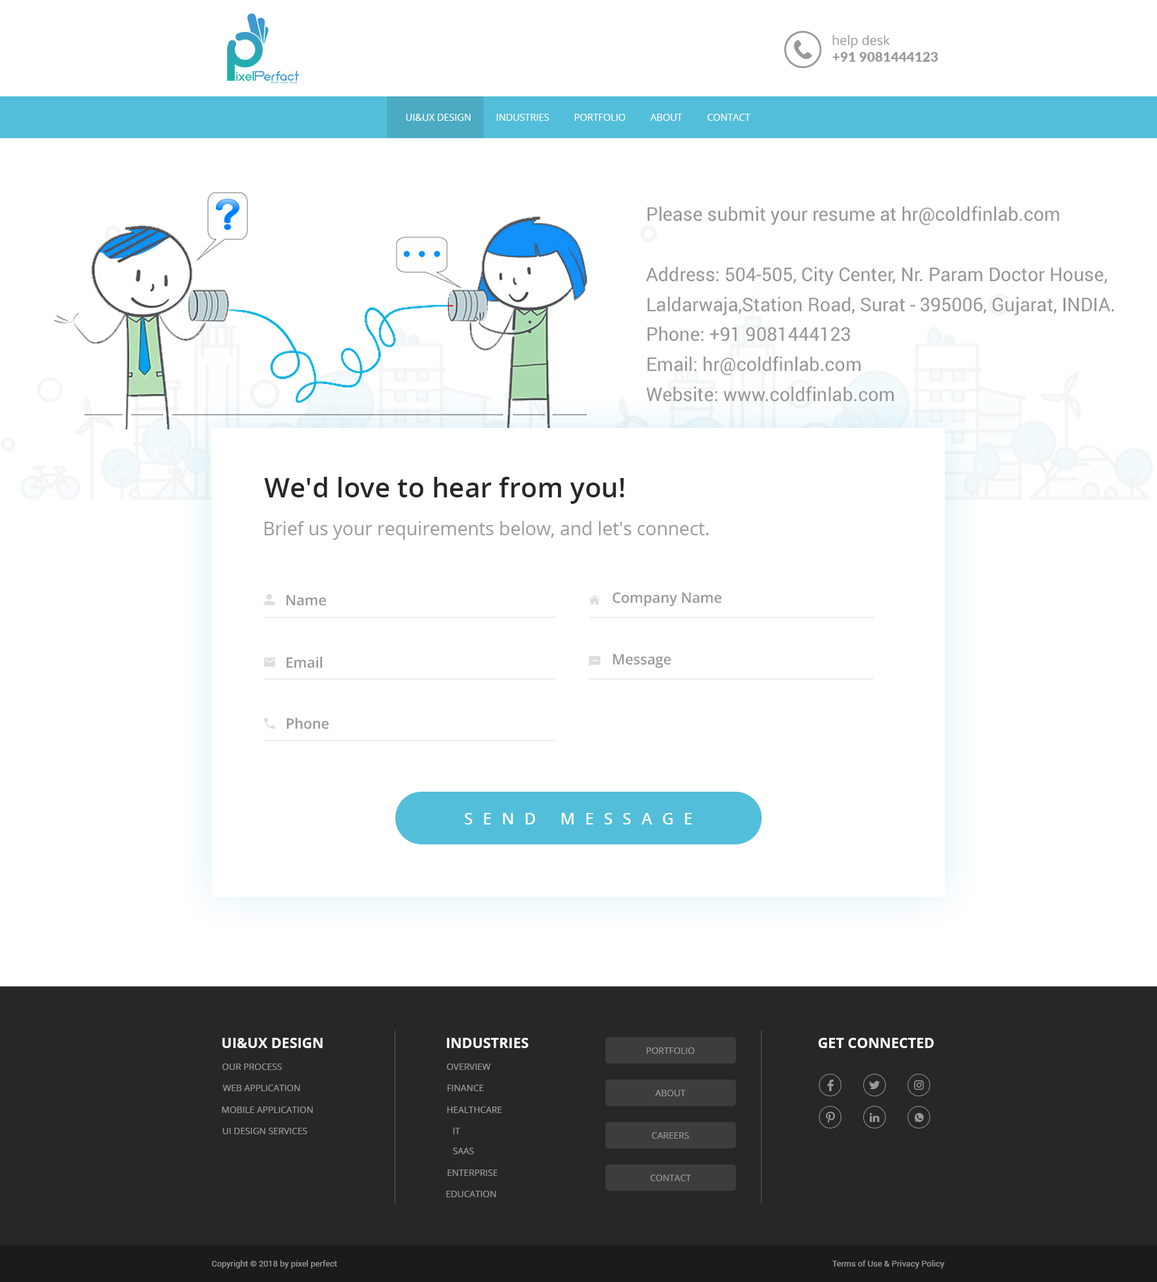
<style>
.page{position:relative;width:1157px;height:1282px;background:#ffffff}
.page>*{position:absolute;margin:0}
.t1{font:13px "OpenSans";color:#999999}
.t2{font:13.6px "Lato-Black";color:#999999}
.t3{font:9.5px "OpenSans";color:#ffffff}
.t4{font:27.1px "OpenSans-Semibold";color:#272727}
.t5{font:18.4px "OpenSans";color:#999999}
.t6{font:14.2px "OpenSans-Semibold";color:#999999}
.t7{font:16.3px "OpenSans-Semibold";letter-spacing:0.6em;color:#ffffff}
.t8{font:14.1px "OpenSans-Bold";color:#ffffff}
.t9{font:9px "OpenSans";color:#999999}
.t10{font:8.4px "Roboto-Regular";color:#999999}
</style>
<div class="page">
<p class="t1" style="left:832px;top:35px;width:58px;height:13px">help desk</p>
<p class="t2" style="left:832px;top:52px;width:106px;height:10px">+91 9081444123</p>
<p class="t3" style="left:406px;top:114px;width:345px;height:7px">UI&amp;UX DESIGN          INDUSTRIES          PORTFOLIO          ABOUT          CONTACT</p>
<p class="t4" style="left:264px;top:477px;width:360px;height:27px">We'd love to hear from you!</p>
<p class="t5" style="left:264px;top:521px;width:444px;height:19px">Brief us your requirements below, and let's connect.</p>
<p class="t6" style="left:613px;top:593px;width:109px;height:14px">Company Name</p>
<p class="t6" style="left:286px;top:595px;width:40px;height:11px">Name</p>
<p class="t6" style="left:287px;top:657px;width:35px;height:12px">Email</p>
<p class="t6" style="left:613px;top:654px;width:58px;height:15px">Message</p>
<p class="t6" style="left:287px;top:718px;width:42px;height:12px">Phone</p>
<p class="t7" style="left:465px;top:813px;width:227px;height:12px">SEND MESSAGE</p>
<p class="t8" style="left:222px;top:1038px;width:101px;height:10px">UI&amp;UX DESIGN</p>
<p class="t8" style="left:447px;top:1038px;width:81px;height:10px">INDUSTRIES</p>
<p class="t9" style="left:647px;top:1048px;width:48px;height:6px">PORTFOLIO</p>
<p class="t8" style="left:818px;top:1038px;width:116px;height:10px">GET CONNECTED</p>
<p class="t9" style="left:222px;top:1064px;width:60px;height:6px">OUR PROCESS</p>
<p class="t9" style="left:447px;top:1064px;width:44px;height:6px">OVERVIEW</p>
<p class="t9" style="left:222px;top:1085px;width:78px;height:7px">WEB APPLICATION</p>
<p class="t9" style="left:447px;top:1085px;width:37px;height:7px">FINANCE</p>
<p class="t9" style="left:655px;top:1090px;width:31px;height:7px">ABOUT</p>
<p class="t9" style="left:222px;top:1107px;width:91px;height:6px">MOBILE APPLICATION</p>
<p class="t9" style="left:447px;top:1107px;width:55px;height:6px">HEALTHCARE</p>
<p class="t9" style="left:222px;top:1128px;width:85px;height:7px">UI DESIGN SERVICES</p>
<p class="t9" style="left:453px;top:1128px;width:7px;height:7px">IT</p>
<p class="t9" style="left:652px;top:1133px;width:37px;height:6px">CAREERS</p>
<p class="t9" style="left:453px;top:1148px;width:21px;height:7px">SAAS</p>
<p class="t9" style="left:447px;top:1170px;width:51px;height:6px">ENTERPRISE</p>
<p class="t9" style="left:651px;top:1175px;width:40px;height:7px">CONTACT</p>
<p class="t9" style="left:446px;top:1191px;width:50px;height:7px">EDUCATION</p>
<p class="t10" style="left:211px;top:1261px;width:126px;height:8px">Copyright © 2018 by pixel perfect</p>
<p class="t10" style="left:832px;top:1261px;width:113px;height:8px">Terms of Use &amp; Privacy Policy</p>
</div>
